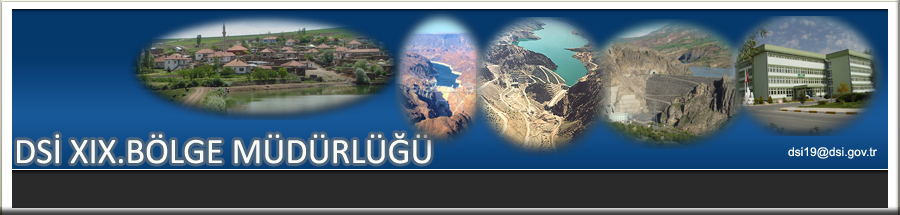
<style>
.page{position:relative;width:900px;height:215px}
.page>*{position:absolute;margin:0}
.t1{font:36px "Calibri";color:#fafaf4}
.t2{font:12px "ArialMT";color:#fafaf4}
</style>
<div class="page">
<p class="t1" style="left:17px;top:133px;width:414px;height:31px">DSİ XIX.BÖLGE MÜDÜRLÜĞÜ</p>
<p class="t2" style="left:788px;top:147px;width:89px;height:12px">dsi19@dsi.gov.tr</p>
</div>
